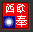
<style>
.page{position:relative;width:33px;height:32px;background:#f20000}
.page>*{position:absolute;margin:0}
.t1{font:10.4px "SimSun";color:#ffffff}
.t2{font:11.7px "SimSun";color:#ffffff}
</style>
<div class="page">
<p class="t1" style="left:6px;top:4px;width:19px;height:9px">西欧</p>
<p class="t2" style="left:16px;top:15px;width:11px;height:12px">奉</p>
</div>
